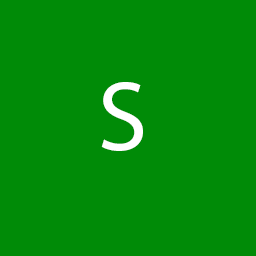
<style>
.page{position:relative;width:256px;height:256px;background:#008b07}
.page>*{position:absolute;margin:0}
.t1{font:100px "MyriadPro-Regular";color:#ffffff}
</style>
<div class="page">
<p class="t1" style="left:101px;top:82px;width:42px;height:69px">S</p>
</div>
